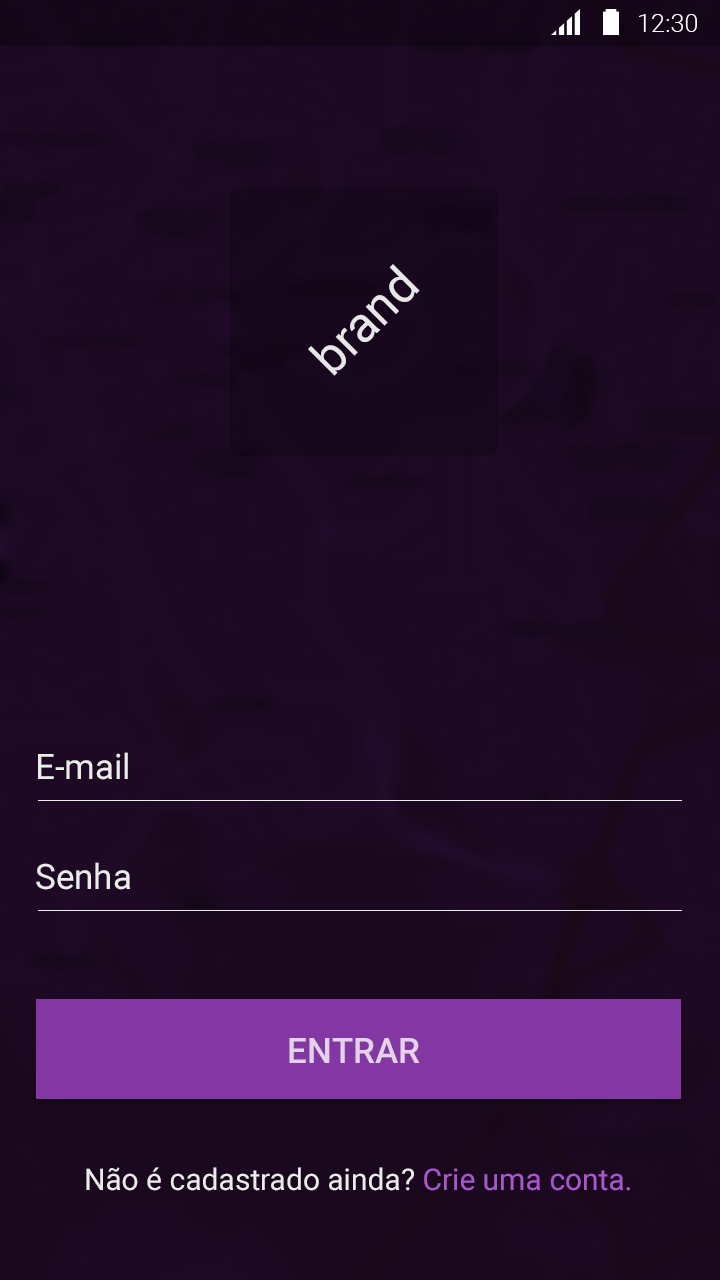
<style>
.page{position:relative;width:720px;height:1280px;background:#1d0923}
.page>*{position:absolute;margin:0}
.t1{font:25.4px "Roboto-Light";color:#ffffff}
.t2{font:50px "Roboto-Regular";color:#e7e6e8}
.t3{font:35px "Roboto-Regular";color:#ebebeb}
.t4{font:35px "Roboto-Medium";color:#e3d2e9}
.t5{font:30px "Roboto-Regular";color:#ebebeb}
.t6{font:30px "Roboto-Regular";color:#a957cd}
</style>
<div class="page">
<p class="t1" style="left:639px;top:14px;width:58px;height:18px">12:30</p>
<p class="t2" style="left:308px;top:264px;width:112px;height:112px;rotate:-45deg">brand</p>
<p class="t3" style="left:38px;top:752px;width:90px;height:28px">E-mail</p>
<p class="t3" style="left:36px;top:862px;width:94px;height:28px">Senha</p>
<p class="t4" style="left:289px;top:1038px;width:131px;height:25px">ENTRAR</p>
<p class="t5" style="left:86px;top:1167px;width:544px;height:24px">Não é cadastrado ainda? <span class="t6">Crie uma conta.</span></p>
</div>
